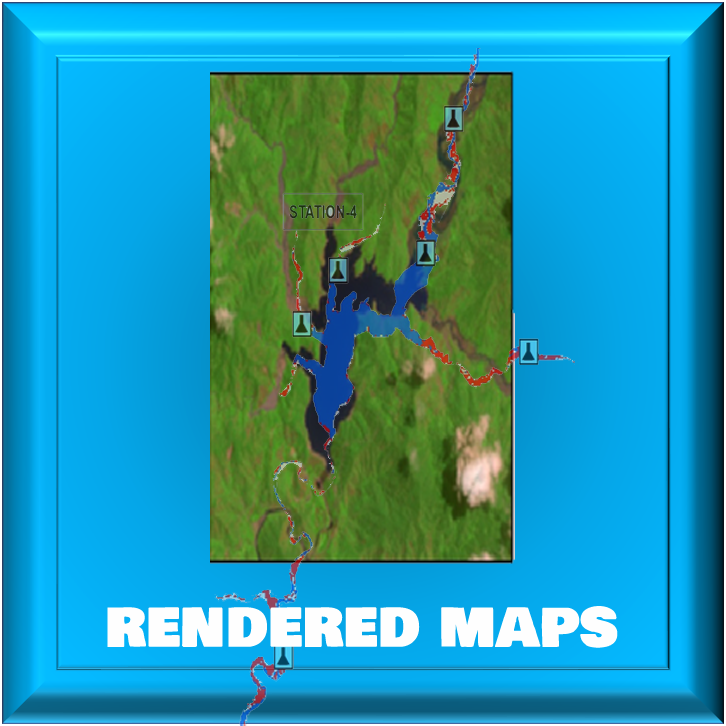
<style>
.page{position:relative;width:726px;height:726px}
.page>*{position:absolute;margin:0}
.t1{font:60px "BowlbyOneSC-Regular";color:#fefefe}
</style>
<div class="page">
<p class="t1" style="left:107px;top:606px;width:511px;height:42px">rendered maps</p>
</div>
